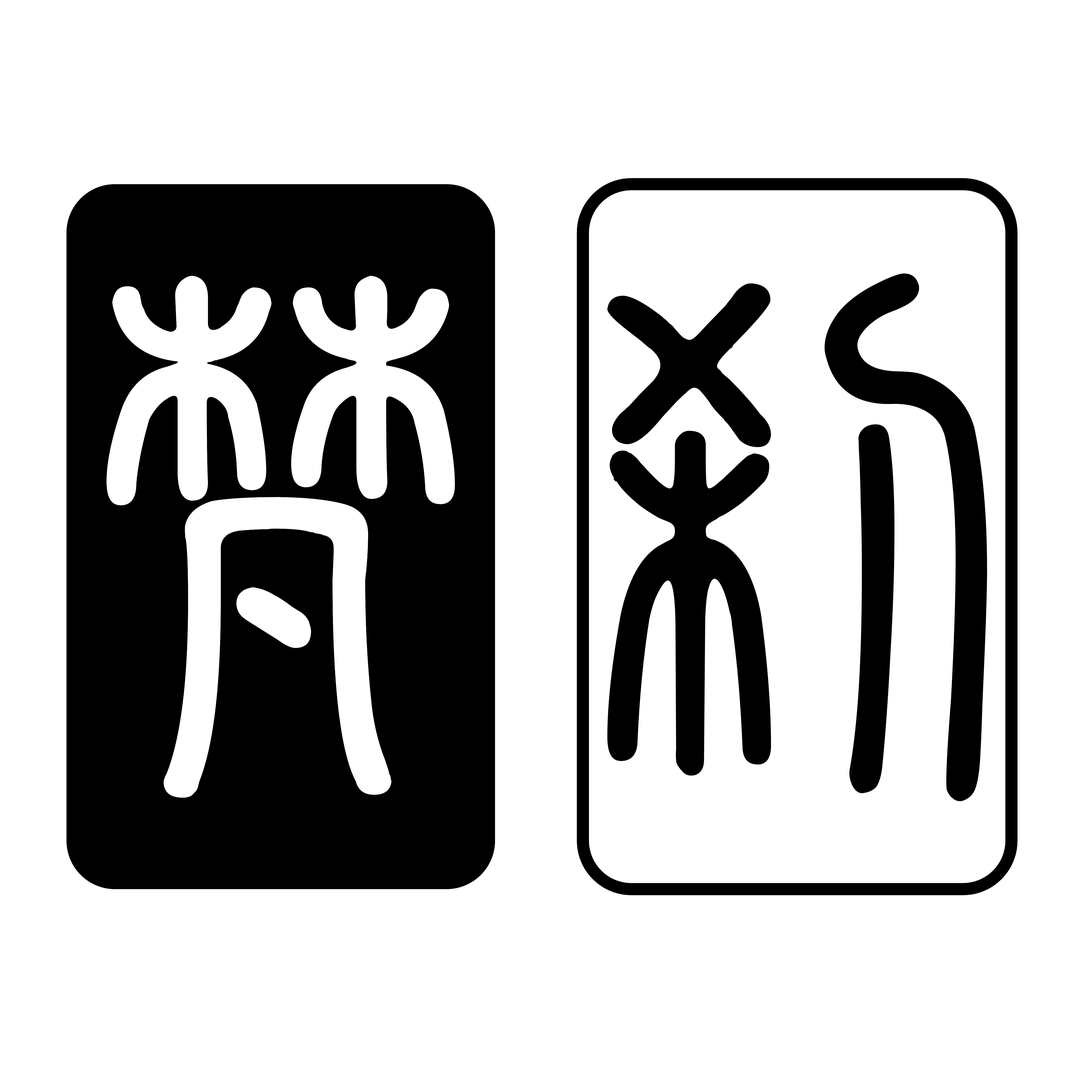
<style>
.page{position:relative;width:1092px;height:1092px;background:#ffffff}
.page>*{position:absolute;margin:0}
.t1{font:582.4px "SJqinyunxiaozhuan-Regular";color:#ffffff}
.t2{font:582.4px "SJqinyunxiaozhuan-Regular";color:#000000}
</style>
<div class="page">
<p class="t1" style="left:107px;top:276px;width:348px;height:522px">梵</p>
<p class="t2" style="left:607px;top:272px;width:380px;height:529px">刹</p>
</div>
